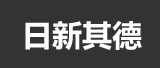
<style>
.page{position:relative;width:160px;height:68px;background:#333333}
.page>*{position:absolute;margin:0}
.t1{font:30px "MicrosoftYaHei-Bold";color:#ffffff}
</style>
<div class="page">
<p class="t1" style="left:25px;top:20px;width:117px;height:31px">日新其德</p>
</div>
